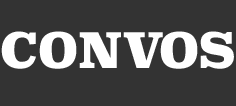
<style>
.page{position:relative;width:236px;height:106px;background:#333333}
.page>*{position:absolute;margin:0}
.t1{font:48.2px "Superclarendon-Black";color:#ffffff}
</style>
<div class="page">
<p class="t1" style="left:1px;top:31px;width:233px;height:38px">CONVOS</p>
</div>
